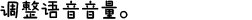
<style>
.page{position:relative;width:252px;height:20px;background:#ffffff}
.page>*{position:absolute;margin:0}
.t1{font:22px "¢è?";color:#000000}
</style>
<div class="page">
<p class="t1" style="left:0px;top:0px;width:128px;height:19px">调整语音音量。</p>
</div>
